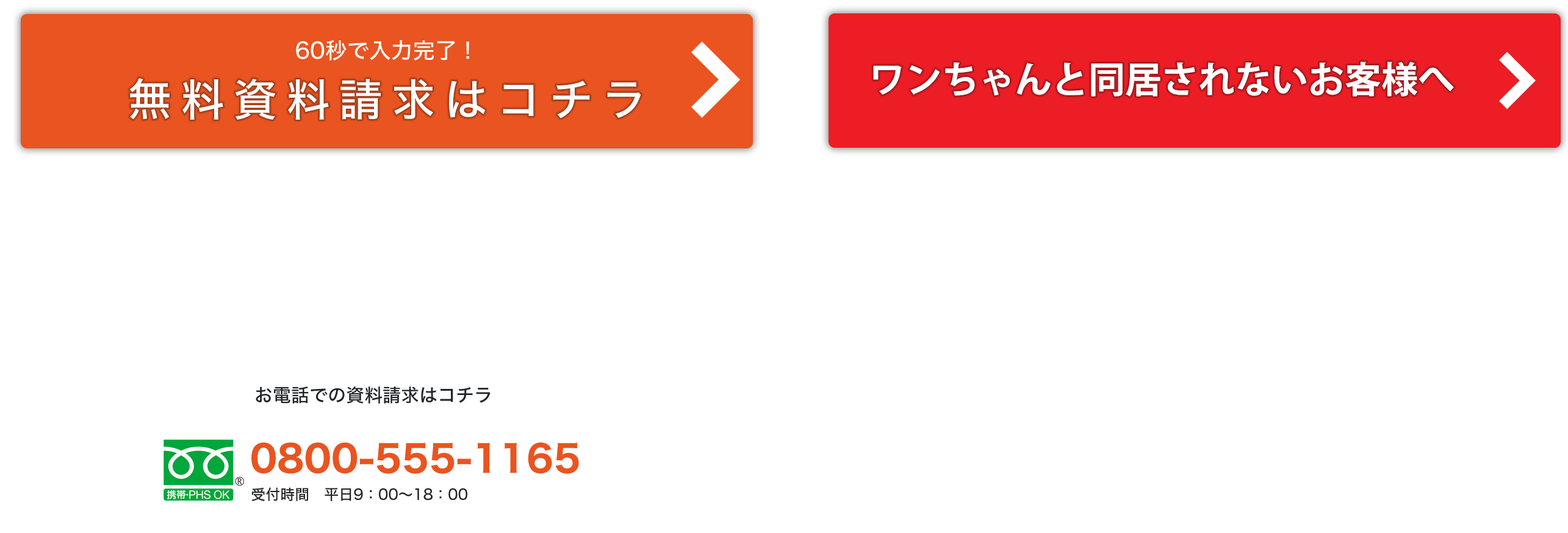
<style>
.page{position:relative;width:1568px;height:533px;background:#ffffff}
.page>*{position:absolute;margin:0}
.t1{font:22px "HiraginoSans-W5";color:#ffffff}
.t2{font:36.6px "KozGoPr6N-Bold";color:#ffffff}
.t3{font:43.9px "HiraginoSans-W5";letter-spacing:0.2em;color:#ffffff}
.t4{font:18.3px "HiraginoSans-W5";color:#212529}
.t5{font:36.6px "HiraginoSans-W7";color:#e95420}
.t6{font:14.6px "HiraginoSans-W5";color:#212529}
</style>
<div class="page">
<p class="t1" style="left:296px;top:40px;width:173px;height:20px">60秒で入力完了！</p>
<p class="t2" style="left:873px;top:62px;width:581px;height:34px">ワンちゃんと同居されないお客様へ</p>
<p class="t3" style="left:129px;top:78px;width:512px;height:42px">無料資料請求はコチラ</p>
<p class="t4" style="left:256px;top:386px;width:235px;height:17px">お電話での資料請求はコチラ</p>
<p class="t5" style="left:251px;top:442px;width:328px;height:31px">0800-555-1165</p>
<p class="t6" style="left:251px;top:487px;width:216px;height:14px">受付時間　平日9：00〜18：00</p>
</div>
